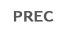
<style>
.page{position:relative;width:63px;height:32px;background:#ffffff}
.page>*{position:absolute;margin:0}
.t1{font:14px "TrebuchetMS";letter-spacing:0.02em;color:#575757;font-weight:bold;scale:1.2 1}
</style>
<div class="page">
<p class="t1" style="left:13px;top:11px;width:41px;height:11px">PREC</p>
</div>
